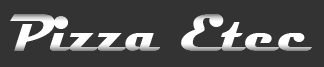
<style>
.page{position:relative;width:324px;height:67px;background:#333333}
.page>*{position:absolute;margin:0}
.t1{font:54px "Magneto-Bold";color:#ffffff}
</style>
<div class="page">
<p class="t1" style="left:10px;top:14px;width:302px;height:37px">Pizza Etec</p>
</div>
